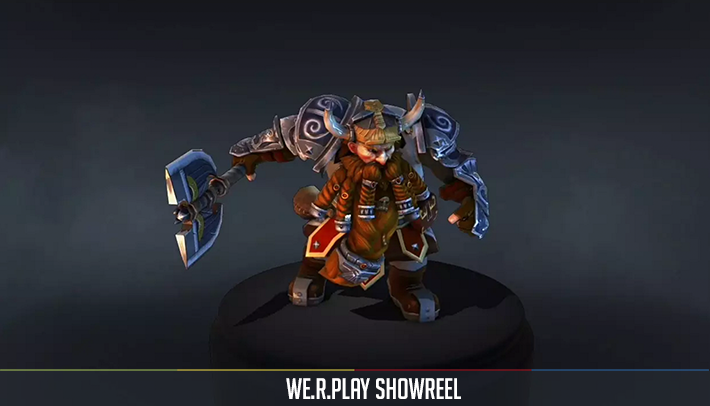
<style>
.page{position:relative;width:710px;height:406px}
.page>*{position:absolute;margin:0}
.t1{font:28.9px "BigNoodleTitling";color:#ffffff}
</style>
<div class="page">
<p class="t1" style="left:286px;top:378px;width:175px;height:21px">we.R.play ShowReel</p>
</div>
